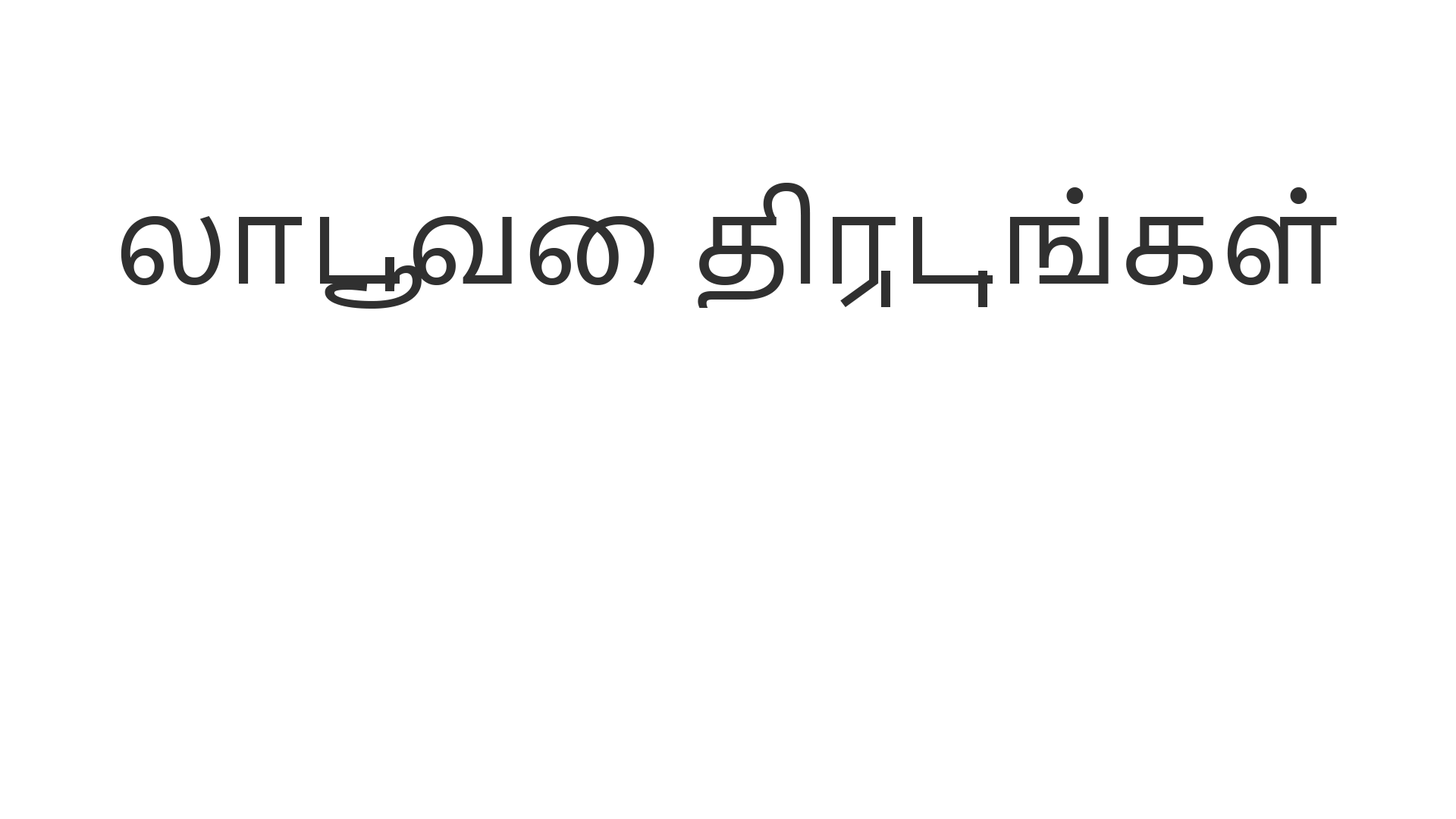
<style>
.page{position:relative;width:1456px;height:819px;background:#ffffff}
.page>*{position:absolute;margin:0}
.t1{font:113.7px "NirmalaUI";color:#303030}
</style>
<div class="page">
<p class="t1" style="left:121px;top:183px;width:1216px;height:126px">லாடூவை திருடுங்கள்</p>
</div>
